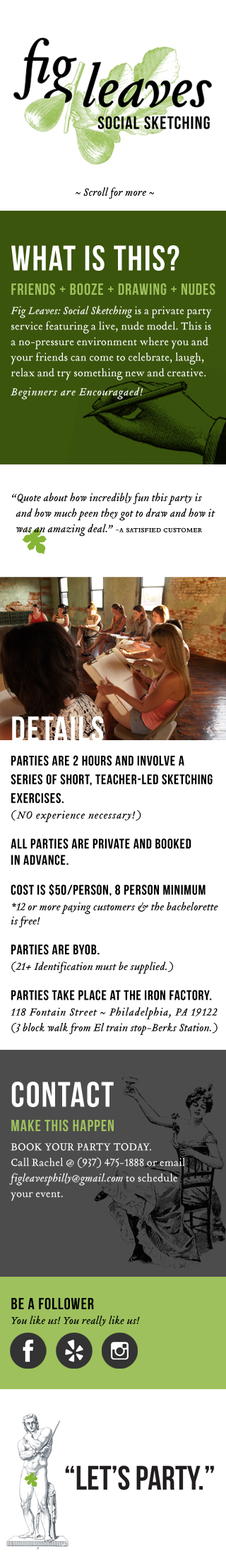
<style>
.page{position:relative;width:226px;height:1568px;background:#ffffff}
.page>*{position:absolute;margin:0}
.t1{font:11.3px "TributeItalic";color:#000000}
.t2{font:35.3px "BebasNeue";letter-spacing:0.04em;color:#ffffff}
.t3{font:11.3px/15.6px "TributeRoman";color:#ffffff}
.t4{font:16.3px/10.6px "BebasNeue";letter-spacing:0.04em;color:#9ec15c}
.t5{font:11.3px/15.6px "TributeItalic";color:#ffffff}
.t6{font:11.3px/15.6px "TributeItalic";letter-spacing:0.04em;color:#ffffff}
.t7{font:11.3px/15.6px "TributeItalic";color:#000000}
.t8{font:9.2px/15.6px "TributeRomanSmallCaps";color:#000000}
.t9{font:14px/18.7px "BebasNeue";letter-spacing:0.04em;color:#000000}
.t10{font:11.3px/15.6px "TributeItalic";letter-spacing:0.04em;color:#000000}
.t11{font:14px/16.3px "BebasNeue";letter-spacing:0.04em;color:#000000}
.t12{font:11.3px/14.1px "TributeItalic";color:#000000}
.t13{font:11.3px/15.6px "TributeRoman";color:#ffffff;text-transform:uppercase}
.t14{font:16.3px "BebasNeue";letter-spacing:0.04em;color:#000000}
</style>
<div class="page">
<p class="t1" style="left:76px;top:187px;width:78px;height:12px">~ Scroll for more ~</p>
<p class="t2" style="left:11px;top:245px;width:169px;height:26px">what is this?</p>
<p class="t3" style="left:11px;top:283px;width:205px;height:116px"><span class="t4">friends + booze + drawing + nudes<br><br></span><span class="t5">Fig Leaves: Social Sketching</span> is a private party service featuring a live, nude model. This is a no-pressure environment where you and your friends can come to celebrate, laugh, relax and try something new and creative. <br><br><span class="t6">Beginners are Encouragaed!</span></p>
<p class="t7" style="left:12px;top:493px;width:204px;height:44px">“Quote about how incredibly fun this party is <br>  and how much peen they got to draw and how it <br>  was an amazing deal.” <span class="t8">-a satisfied customer</span></p>
<p class="t2" style="left:12px;top:716px;width:92px;height:26px">DETAILS</p>
<p class="t9" style="left:11px;top:755px;width:207px;height:280px">parties are 2 hours and involve a series of short, teacher-led sketching exercises.<br><span class="t10">(NO experience necessary!)<br><br></span>all parties are private and booked <br><span class="t11">in advance.<br><br></span>cost is $50/person, 8 person minimum<br><span class="t7">*12 or more paying customers &amp; the </span><span class="t12">bachelorette is free!<br><br></span>parties are byob.<br><span class="t7">(21+ Identification must be supplied.)<br><br></span>parties take place at the IRon factory.<br><span class="t10">118 Fontain Street ~ Philadelphia, PA 19122<br></span><span class="t7">(3 block walk from El train stop-Berks Station.)</span></p>
<p class="t2" style="left:11px;top:1082px;width:103px;height:25px">contact</p>
<p class="t3" style="left:9px;top:1119px;width:176px;height:82px"><span class="t4">make this happen<br><br></span><span class="t13">Book your party today. <br></span>Call Rachel @ (937) 475-1888 or email <span class="t5">figleavesphilly@gmail.com </span>to schedule <br>your event.</p>
<p class="t14" style="left:11px;top:1297px;width:83px;height:13px">be a follower</p>
<p class="t1" style="left:11px;top:1316px;width:129px;height:10px">You like us! You really like us!</p>
</div>
